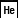
<style>
.page{position:relative;width:18px;height:18px;background:#ffffff}
.page>*{position:absolute;margin:0}
.t1{font:12px "FranklinGothic-Medium";scale:0.8 1}
</style>
<div class="page">
<p class="t1" style="left:4px;top:5px;width:11px;height:8px">He</p>
</div>
